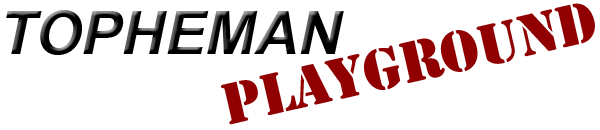
<style>
.page{position:relative;width:600px;height:130px;background:#ffffff}
.page>*{position:absolute;margin:0}
.t1{font:54px "StencilStd";color:#900000}
.t2{font:60px "Arial-BoldItalicMT";color:#000000}
</style>
<div class="page">
<p class="t1" style="left:221px;top:3px;width:374px;height:122px;rotate:-13deg">PLAYGROUND</p>
<p class="t2" style="left:6px;top:10px;width:338px;height:45px">TOPHEMAN</p>
</div>
